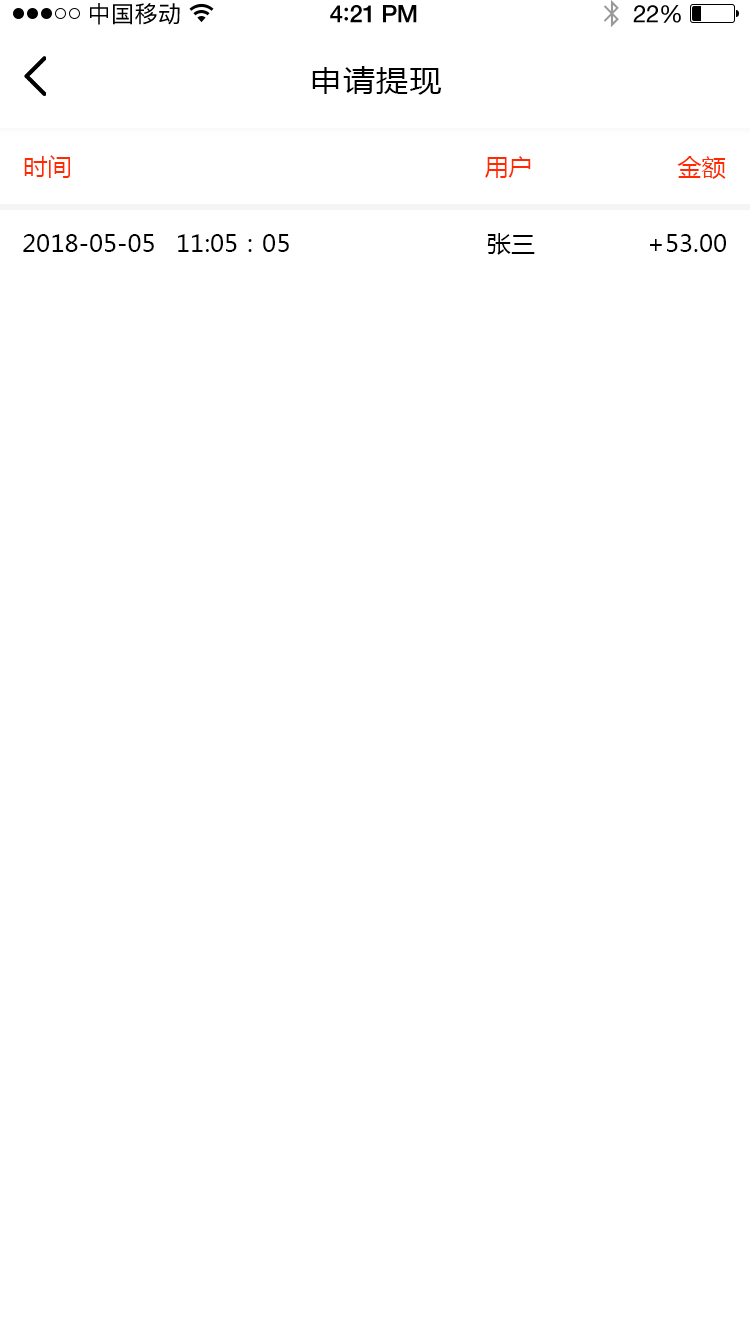
<style>
.page{position:relative;width:750px;height:1334px;background:#ffffff}
.page>*{position:absolute;margin:0}
.t1{font:23px "PingFangSC-Regular";letter-spacing:0.02em;color:#000000}
.t2{font:24px "HelveticaNeue-Medium";letter-spacing:-0.02em;color:#000000}
.t3{font:26px "Avenir-Medium";letter-spacing:-0.02em;color:#000000}
.t4{font:24px "HelveticaNeue";letter-spacing:-0.02em;color:#000000}
.t5{font:30px "MicrosoftYaHei";letter-spacing:0.05em;color:#000000;scale:1.06 1}
.t6{font:24px "MicrosoftYaHei";color:#ff2a00;text-transform:uppercase}
.t7{font:24px "MicrosoftYaHei";color:#000000;text-transform:uppercase}
</style>
<div class="page">
<p class="t1" style="left:90px;top:3px;width:90px;height:22px">中国移动</p>
<p class="t2" style="left:330px;top:5px;width:87px;height:18px">4<span class="t3">:</span>21 PM</p>
<p class="t4" style="left:633px;top:5px;width:48px;height:18px">22%</p>
<p class="t5" style="left:312px;top:66px;width:129px;height:29px">申请提现</p>
<p class="t6" style="left:24px;top:155px;width:46px;height:23px">时间</p>
<p class="t6" style="left:485px;top:156px;width:46px;height:22px">用户</p>
<p class="t6" style="left:677px;top:156px;width:49px;height:23px">金额</p>
<p class="t7" style="left:487px;top:233px;width:48px;height:22px">张三</p>
<p class="t7" style="left:23px;top:234px;width:131px;height:18px">2018-05-05</p>
<p class="t7" style="left:178px;top:234px;width:111px;height:18px">11:05：05</p>
<p class="t7" style="left:650px;top:234px;width:76px;height:18px">+53.00</p>
</div>
